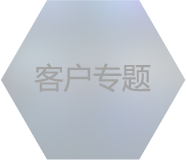
<style>
.page{position:relative;width:186px;height:160px;background:#ffffff}
.page>*{position:absolute;margin:0}
.t1{font:29.2px "MicrosoftYaHei";color:#a4a3a3}
</style>
<div class="page">
<p class="t1" style="left:34px;top:63px;width:117px;height:30px">客户专题</p>
</div>
